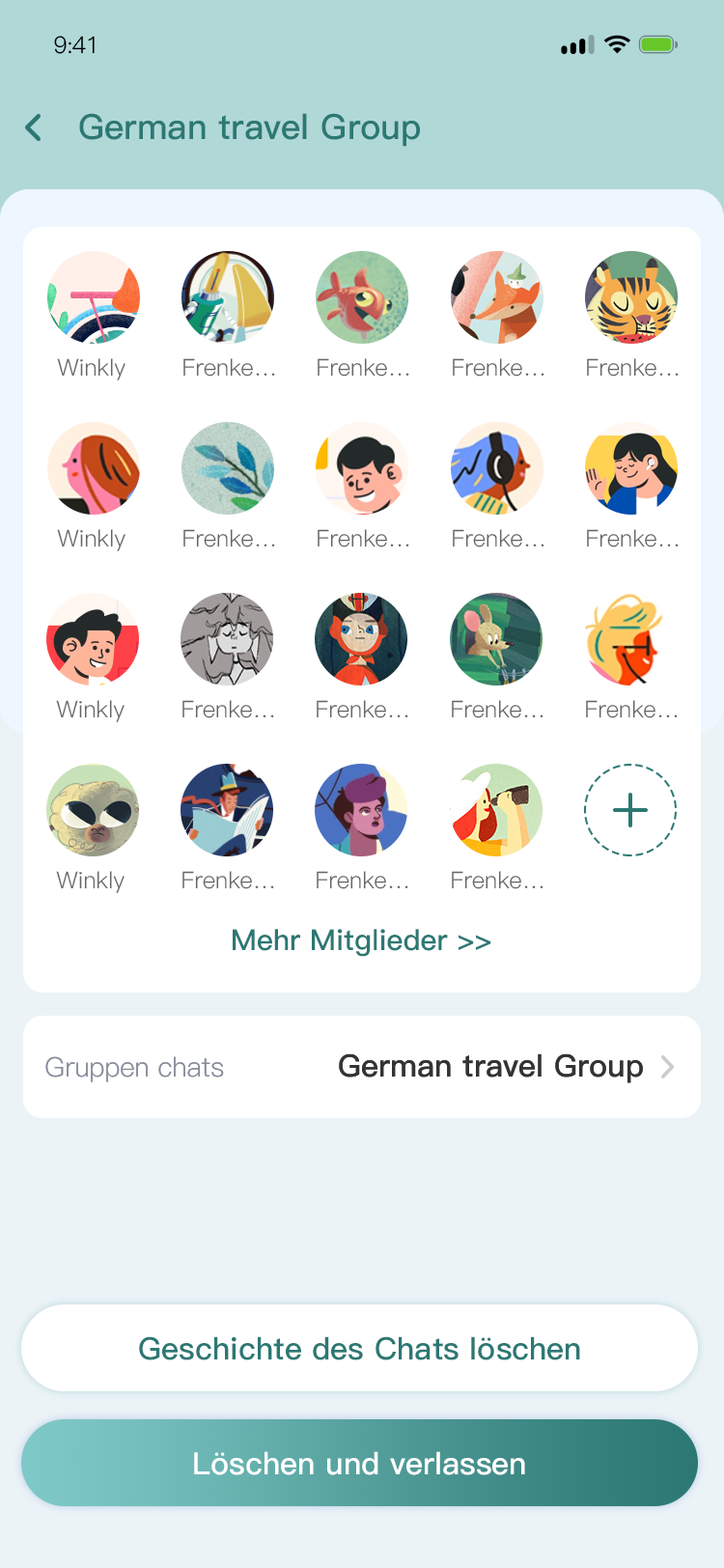
<style>
.page{position:relative;width:724px;height:1568px;background:#ffffff}
.page>*{position:absolute;margin:0}
.t1{font:23.2px "PingFang-SC-Regular";letter-spacing:-0.025em;color:#000000}
.t2{font:34.8px "PingFang-SC-Bold";color:#2c7873}
.t3{font:34.8px "PingFang-SC-Bold";color:#2c7873;text-transform:uppercase}
.t4{font:23.2px "PingFang-SC-Regular";color:#666666}
.t5{font:29px "PingFang-SC-Bold";color:#2c7873}
.t6{font:27px "PingFang-SC-Regular";color:#878c9a}
.t7{font:27px "PingFang-SC-Regular";color:#878c9a;text-transform:uppercase}
.t8{font:30.9px "PingFang-SC-Bold";color:#333333}
.t9{font:30.9px "PingFang-SC-Bold";color:#333333;text-transform:uppercase}
.t10{font:30.9px "PingFang-SC-Bold";color:#2c7873}
.t11{font:30.9px "PingFang-SC-Bold";color:#ffffff}
</style>
<div class="page">
<p class="t1" style="left:54px;top:36px;width:41px;height:18px">9:41</p>
<p class="t2" style="left:79px;top:113px;width:341px;height:34px"><span class="t3">G</span>erman travel Group</p>
<p class="t4" style="left:57px;top:358px;width:69px;height:22px">Winkly</p>
<p class="t4" style="left:183px;top:358px;width:92px;height:19px">Frenke…</p>
<p class="t4" style="left:318px;top:358px;width:91px;height:19px">Frenke…</p>
<p class="t4" style="left:453px;top:358px;width:92px;height:19px">Frenke…</p>
<p class="t4" style="left:587px;top:358px;width:92px;height:19px">Frenke…</p>
<p class="t4" style="left:57px;top:529px;width:69px;height:22px">Winkly</p>
<p class="t4" style="left:183px;top:529px;width:92px;height:18px">Frenke…</p>
<p class="t4" style="left:318px;top:529px;width:91px;height:18px">Frenke…</p>
<p class="t4" style="left:453px;top:529px;width:92px;height:18px">Frenke…</p>
<p class="t4" style="left:587px;top:529px;width:92px;height:18px">Frenke…</p>
<p class="t4" style="left:56px;top:700px;width:69px;height:22px">Winkly</p>
<p class="t4" style="left:182px;top:700px;width:92px;height:18px">Frenke…</p>
<p class="t4" style="left:317px;top:700px;width:91px;height:18px">Frenke…</p>
<p class="t4" style="left:452px;top:700px;width:92px;height:18px">Frenke…</p>
<p class="t4" style="left:586px;top:700px;width:92px;height:18px">Frenke…</p>
<p class="t4" style="left:56px;top:871px;width:69px;height:22px">Winkly</p>
<p class="t4" style="left:182px;top:871px;width:92px;height:18px">Frenke…</p>
<p class="t4" style="left:317px;top:871px;width:91px;height:18px">Frenke…</p>
<p class="t4" style="left:452px;top:871px;width:92px;height:18px">Frenke…</p>
<p class="t5" style="left:233px;top:929px;width:258px;height:28px">Mehr Mitglieder &gt;&gt;</p>
<p class="t6" style="left:45px;top:1056px;width:179px;height:26px"><span class="t7">G</span>ruppen chats</p>
<p class="t8" style="left:339px;top:1053px;width:304px;height:30px"><span class="t9">G</span>erman travel Group</p>
<p class="t10" style="left:139px;top:1336px;width:441px;height:24px">Geschichte des Chats löschen</p>
<p class="t11" style="left:194px;top:1451px;width:331px;height:24px">Löschen und verlassen</p>
</div>
